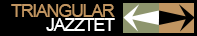
<style>
.page{position:relative;width:197px;height:36px;background:#000000}
.page>*{position:absolute;margin:0}
.t1{font:18px "ArialMT";letter-spacing:-0.075em;color:#c19561}
.t2{font:18px "ArialMT";letter-spacing:-0.075em;color:#ffffff}
</style>
<div class="page">
<p class="t1" style="left:11px;top:4px;width:104px;height:13px">TRIANGULAR</p>
<p class="t2" style="left:46px;top:18px;width:69px;height:13px">JAZZTET</p>
</div>
